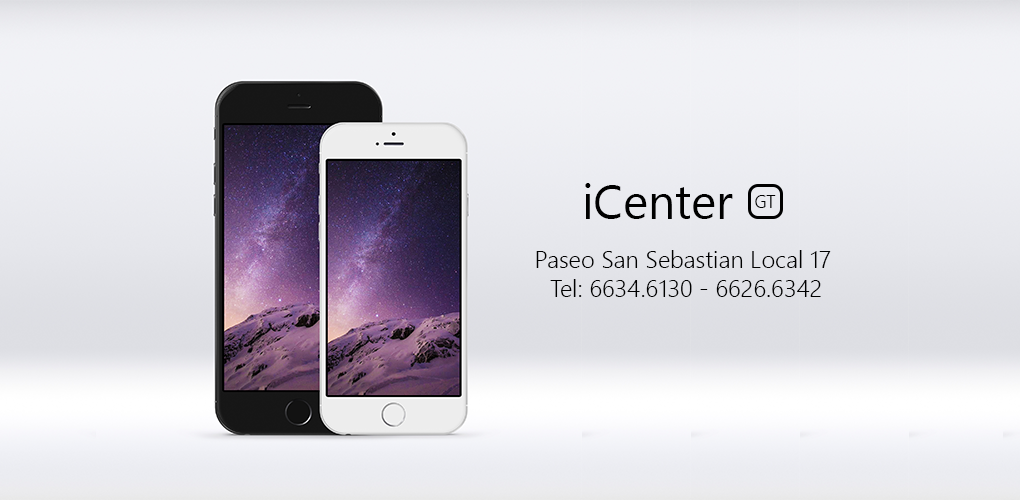
<style>
.page{position:relative;width:1020px;height:500px}
.page>*{position:absolute;margin:0}
.t1{font:48px "NirmalaUI";color:#000000}
.t2{font:18px "NirmalaUI-Semilight";color:#000000}
.t3{font:24px "NirmalaUI-Semilight";color:#000000}
</style>
<div class="page">
<p class="t1" style="left:585px;top:183px;width:148px;height:36px">iCenter</p>
<p class="t2" style="left:755px;top:195px;width:21px;height:13px">GT</p>
<p class="t3" style="left:536px;top:250px;width:295px;height:47px;text-align:center">Paseo San Sebastian Local 17 <br>Tel: 6634.6130 - 6626.6342</p>
</div>
